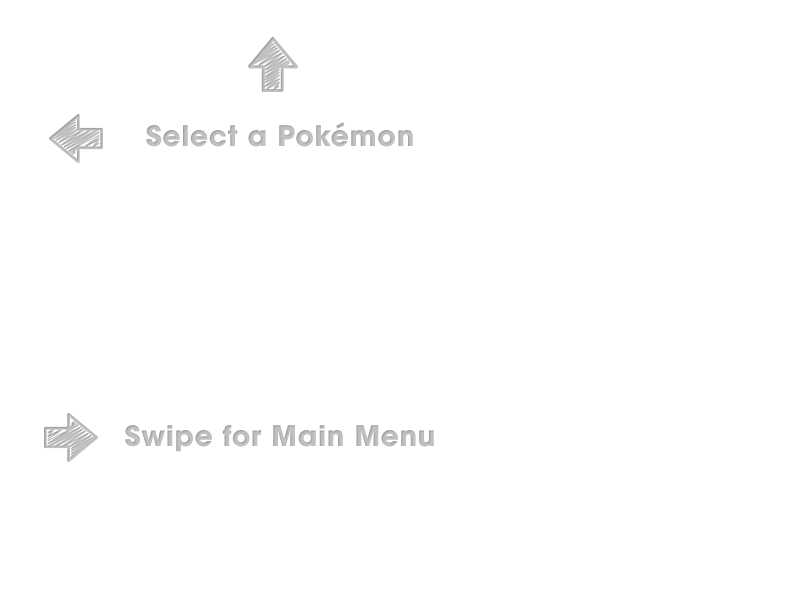
<style>
.page{position:relative;width:800px;height:600px;background:#ffffff}
.page>*{position:absolute;margin:0}
.t1{font:28px "ITCAvantGardeStd-Bold";letter-spacing:0.025em;color:#c1c1c1}
</style>
<div class="page">
<p class="t1" style="left:146px;top:122px;width:267px;height:25px">Select a Pokémon</p>
<p class="t1" style="left:125px;top:425px;width:309px;height:27px">Swipe for Main Menu</p>
</div>
